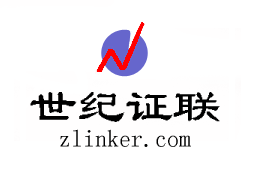
<style>
.page{position:relative;width:255px;height:170px;background:#ffffff}
.page>*{position:absolute;margin:0}
.t1{font:48px "Á¥Êé-Regular";color:#000000}
.t2{font:24px "Á¥Êé-Regular";color:#000000}
</style>
<div class="page">
<p class="t1" style="left:30px;top:92px;width:190px;height:30px">世纪证联</p>
<p class="t2" style="left:60px;top:129px;width:131px;height:18px">zlinker.com</p>
</div>
